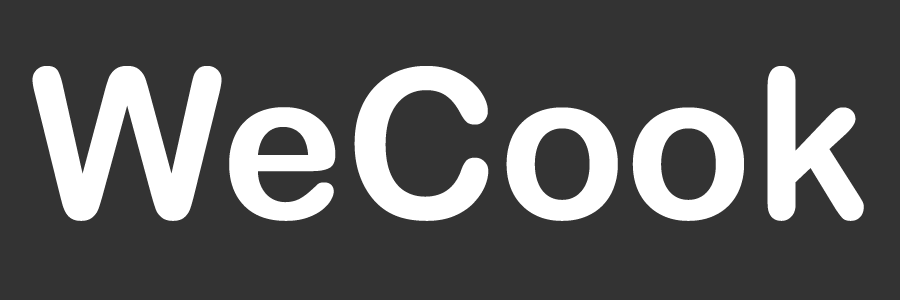
<style>
.page{position:relative;width:900px;height:300px;background:#333333}
.page>*{position:absolute;margin:0}
.t1{font:209px "ArialRoundedMTBold";color:#ffffff}
</style>
<div class="page">
<p class="t1" style="left:32px;top:66px;width:832px;height:155px">WeCook</p>
</div>
